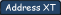
<style>
.page{position:relative;width:61px;height:15px;background:#244468}
.page>*{position:absolute;margin:0}
.t1{font:9px "ComicSansMS";color:#ffffff}
</style>
<div class="page">
<p class="t1" style="left:5px;top:3px;width:51px;height:8px">Address XT</p>
</div>
